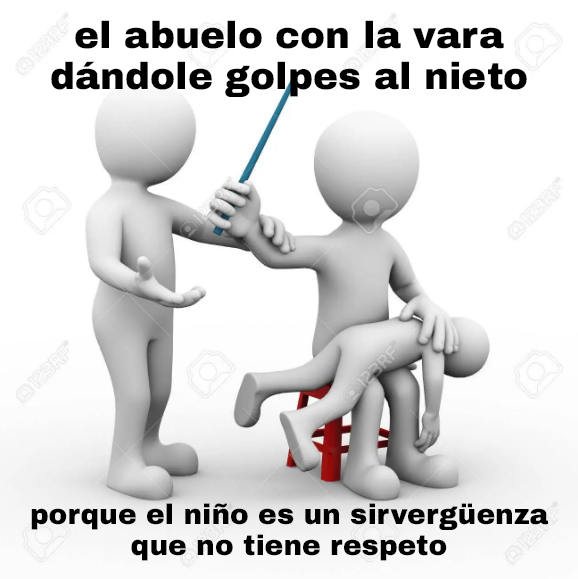
<style>
.page{position:relative;width:578px;height:579px;background:#ffffff}
.page>*{position:absolute;margin:0}
.t1{font:37.6px "ArchivoBlack-Regular";color:#000000}
.t2{font:28px "ArchivoBlack-Regular";color:#000000}
</style>
<div class="page">
<p class="t1" style="left:51px;top:20px;width:476px;height:77px;text-align:center">el abuelo con la vara<br>dándole golpes al nieto</p>
<p class="t2" style="left:31px;top:503px;width:517px;height:58px;text-align:center">porque el niño es un sirvergüenza<br>que no tiene respeto</p>
</div>
